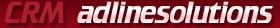
<style>
.page{position:relative;width:280px;height:28px}
.page>*{position:absolute;margin:0}
.t1{font:26.4px "FederationCrille";letter-spacing:-0.025em;color:#ae1e30}
.t2{font:26.4px "FederationCrille";letter-spacing:-0.025em;color:#fdeced}
</style>
<div class="page">
<p class="t1" style="left:5px;top:1px;width:59px;height:22px">CRM</p>
<p class="t2" style="left:77px;top:1px;width:196px;height:22px">adlinesolutions</p>
</div>
